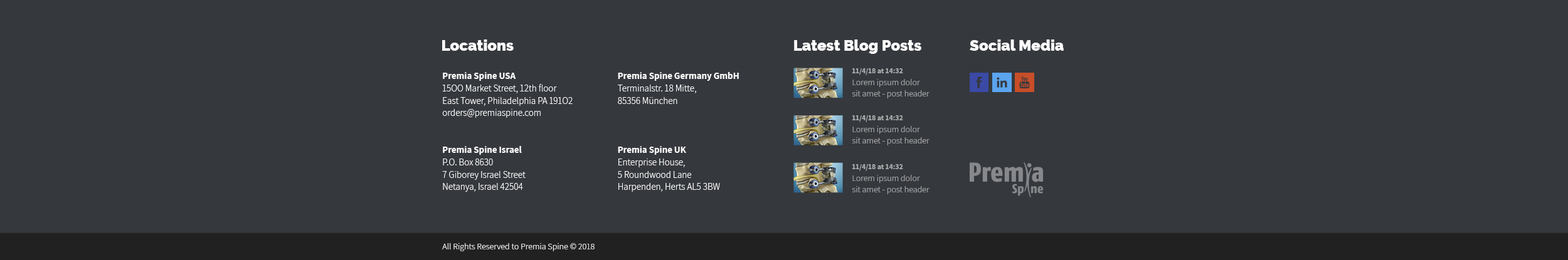
<style>
.page{position:relative;width:1568px;height:260px;background:#35383d}
.page>*{position:absolute;margin:0}
.t1{font:15.1px "Raleway-Black";color:#ffffff}
.t2{font:9.4px/12.3px "Assistant-Light";color:#ffffff}
.t3{font:9.4px/12.3px "Assistant-Bold";color:#ffffff}
.t4{font:8.8px/11.7px "Assistant-Light";color:#aeafb0}
.t5{font:7.5px/11.7px "Assistant-Bold";color:#aeafb0}
.t6{font:8.8px "Assistant-Light";color:#ffffff}
</style>
<div class="page">
<p class="t1" style="left:442px;top:40px;width:72px;height:11px">Locations</p>
<p class="t1" style="left:794px;top:40px;width:127px;height:14px">Latest Blog Posts</p>
<p class="t1" style="left:970px;top:40px;width:94px;height:11px">Social Media</p>
<p class="t2" style="left:442px;top:72px;width:131px;height:120px"><span class="t3">Premia Spine USA<br></span>15OO Market Street, 12th floor <br>East Tower, Philadelphia PA 191O2<br>orders@premiaspine.com<br><br><br><span class="t3">Premia Spine Israel<br></span>P.O. Box 8630<br>7 Giborey Israel Street<br>Netanya, Israel 42504</p>
<p class="t2" style="left:618px;top:72px;width:121px;height:120px"><span class="t3">Premia Spine Germany GmbH<br></span>Terminalstr. 18 Mitte, <br>85356 München <br><span class="t3"><br><br><br>Premia Spine UK<br></span>Enterprise House,<br>5 Roundwood Lane<br>Harpenden, Herts AL5 3BW</p>
<p class="t4" style="left:852px;top:68px;width:78px;height:30px"><span class="t5">11/4/18 at 14:32<br></span>Lorem ipsum dolor<br>sit amet - post header</p>
<p class="t4" style="left:852px;top:115px;width:78px;height:31px"><span class="t5">11/4/18 at 14:32<br></span>Lorem ipsum dolor<br>sit amet - post header</p>
<p class="t4" style="left:852px;top:164px;width:78px;height:30px"><span class="t5">11/4/18 at 14:32<br></span>Lorem ipsum dolor<br>sit amet - post header</p>
<p class="t6" style="left:442px;top:243px;width:153px;height:9px">All Rights Reserved to Premia Spine © 2018</p>
</div>
